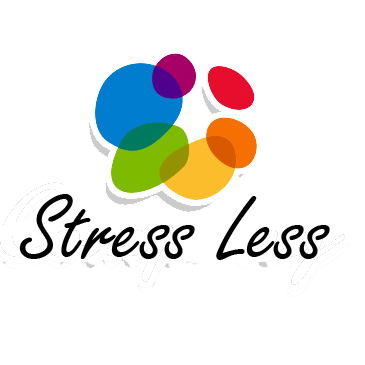
<style>
.page{position:relative;width:365px;height:365px;background:#ffffff}
.page>*{position:absolute;margin:0}
.t1{font:100px "FreestyleScript-Regular";color:#000000}
</style>
<div class="page">
<p class="t1" style="left:19px;top:194px;width:311px;height:66px">Stress Less</p>
</div>
